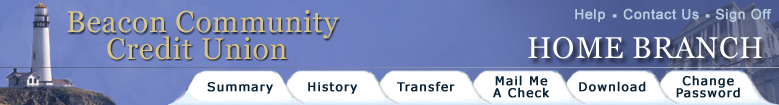
<style>
.page{position:relative;width:779px;height:105px}
.page>*{position:absolute;margin:0}
.t1{font:30px "Georgia";letter-spacing:0.025em;color:#d5c185}
.t2{font:14px "ArialMT";letter-spacing:0.025em;color:#b8cee0;font-weight:bold}
.t3{font:30px "ArialMT";letter-spacing:0.025em;color:#b8cee0;font-weight:bold}
.t4{font:30px "Georgia";letter-spacing:0.025em;color:#ffffff}
.t5{font:12px/12px "Verdana";letter-spacing:0.075em;color:#092235;font-weight:bold}
.t6{font:12px "Verdana";letter-spacing:0.075em;color:#092235;font-weight:bold}
</style>
<div class="page">
<p class="t1" style="left:67px;top:10px;width:272px;height:29px">Beacon Community</p>
<p class="t2" style="left:575px;top:9px;width:30px;height:13px">Help</p>
<p class="t3" style="left:612px;top:14px;width:5px;height:4px">.</p>
<p class="t2" style="left:623px;top:8px;width:76px;height:12px">Contact Us</p>
<p class="t3" style="left:705px;top:14px;width:5px;height:4px">.</p>
<p class="t2" style="left:715px;top:8px;width:57px;height:14px">Sign Off</p>
<p class="t1" style="left:107px;top:36px;width:180px;height:24px">Credit Union</p>
<p class="t4" style="left:528px;top:36px;width:234px;height:23px">HOME BRANCH</p>
<p class="t5" style="left:493px;top:75px;width:57px;height:23px;text-align:center">Mail Me<br>A Check</p>
<p class="t5" style="left:676px;top:75px;width:64px;height:23px;text-align:center">Change<br>Password</p>
<p class="t6" style="left:207px;top:82px;width:66px;height:12px">Summary</p>
<p class="t6" style="left:308px;top:82px;width:50px;height:12px">History</p>
<p class="t6" style="left:397px;top:81px;width:58px;height:11px">Transfer</p>
<p class="t6" style="left:579px;top:81px;width:67px;height:11px">Download</p>
</div>
